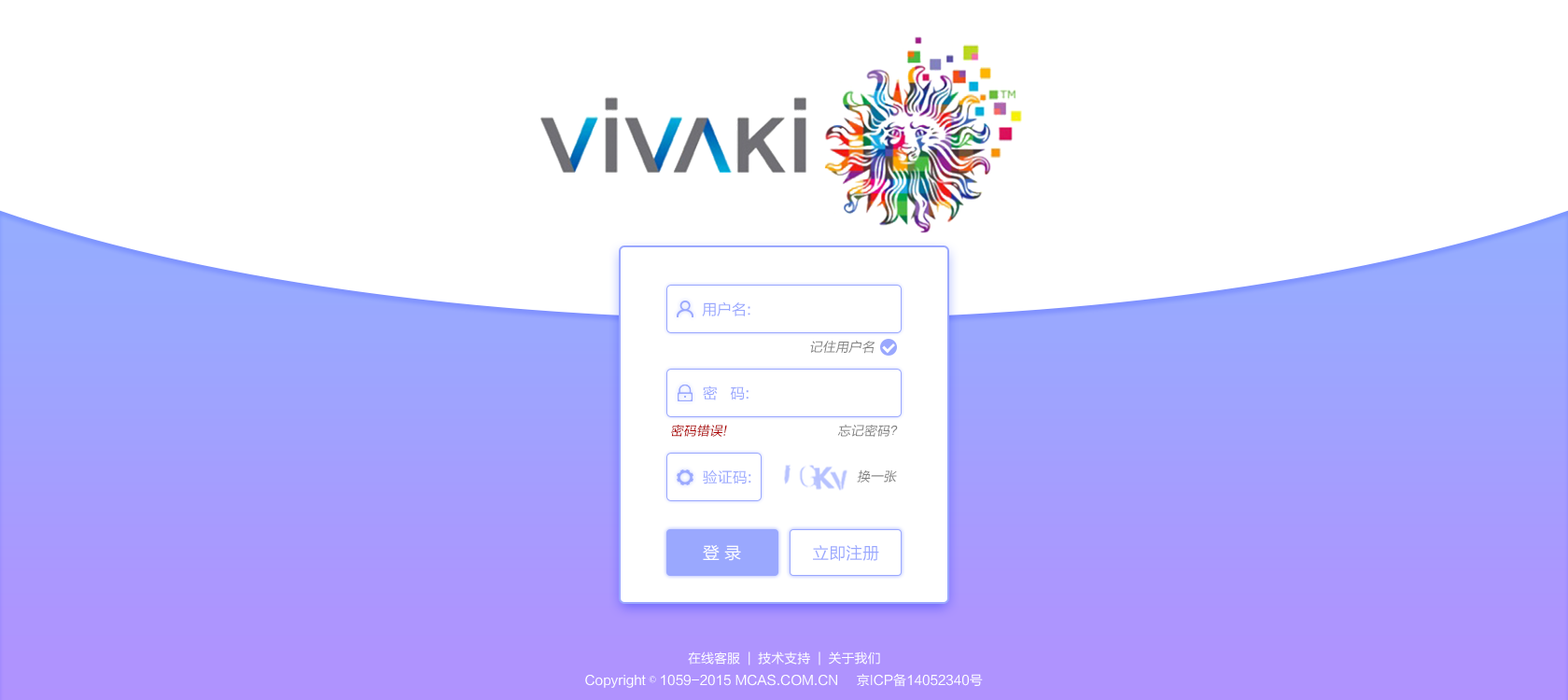
<style>
.page{position:relative;width:1568px;height:700px;background:#ffffff}
.page>*{position:absolute;margin:0}
.t1{font:14.9px "FZLTHJW--GB1-0";color:#9aa8fe}
.t2{font:13.1px "FZLTHJW--GB1-0";color:#808080;font-style:italic}
.t3{font:13.1px "FZLTHJW--GB1-0";color:#ad0000;font-style:italic}
.t4{font:16.8px "FZLTHJW--GB1-0";color:#ffffff}
.t5{font:16.8px "FZLTHJW--GB1-0";color:#9aa8fe}
.t6{font:13.1px "FZLTHJW--GB1-0";color:#ffffff}
.t7{font:13.1px "SimSun";color:#ffffff}
</style>
<div class="page">
<p class="t1" style="left:702px;top:301px;width:48px;height:15px">用户名:</p>
<p class="t2" style="left:810px;top:341px;width:65px;height:13px">记住用户名</p>
<p class="t1" style="left:703px;top:385px;width:46px;height:15px">密   码:</p>
<p class="t3" style="left:671px;top:424px;width:56px;height:13px">密码错误!</p>
<p class="t2" style="left:837px;top:424px;width:61px;height:13px">忘记密码？</p>
<p class="t1" style="left:703px;top:469px;width:48px;height:15px">验证码:</p>
<p class="t2" style="left:857px;top:469px;width:40px;height:14px">换一张</p>
<p class="t4" style="left:703px;top:545px;width:38px;height:16px">登 录</p>
<p class="t5" style="left:813px;top:545px;width:66px;height:16px">立即注册</p>
<p class="t6" style="left:688px;top:651px;width:192px;height:14px">在线客服  |  技术支持  |  关于我们</p>
<p class="t6" style="left:585px;top:674px;width:398px;height:14px">Copyright <span class="t7">©</span> 1059-2015 MCAS.COM.CN     京ICP备14052340号</p>
</div>
